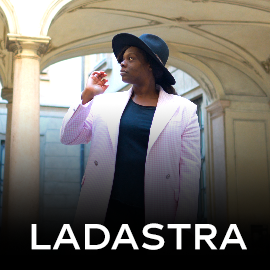
<style>
.page{position:relative;width:270px;height:270px}
.page>*{position:absolute;margin:0}
.t1{font:36px "TypoldExtended-Medium";color:#ffffff}
</style>
<div class="page">
<p class="t1" style="left:31px;top:223px;width:216px;height:27px">LADASTRA</p>
</div>
